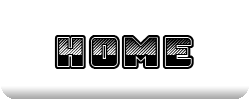
<style>
.page{position:relative;width:250px;height:100px;background:#ffffff}
.page>*{position:absolute;margin:0}
.t1{font:43px "SunsetGP";color:#000000}
</style>
<div class="page">
<p class="t1" style="left:54px;top:35px;width:140px;height:34px">Home</p>
</div>
